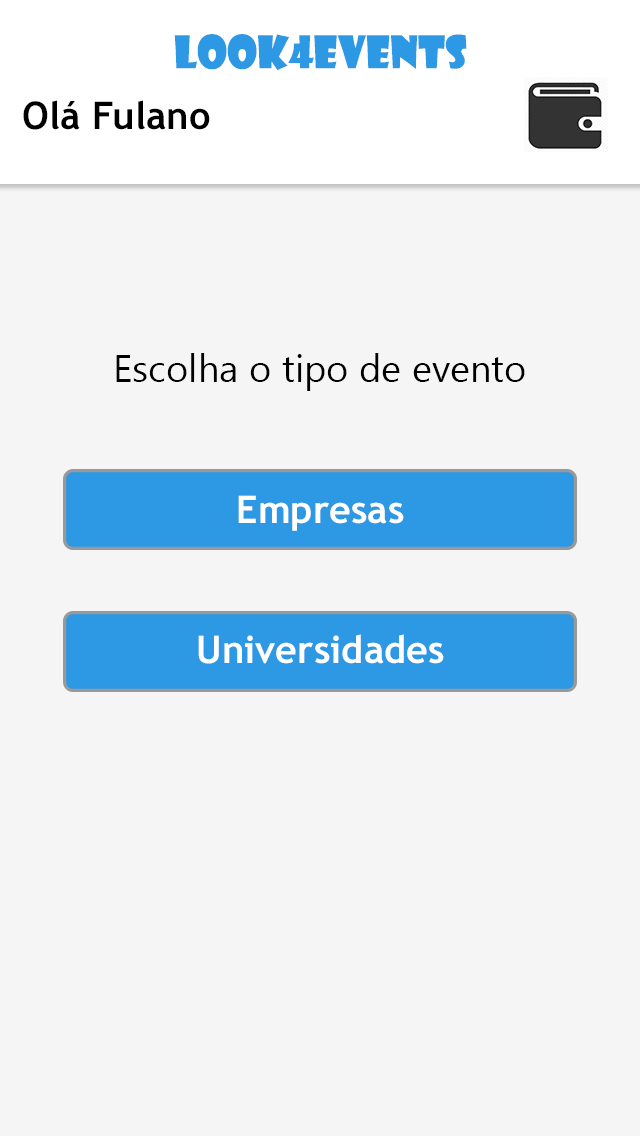
<style>
.page{position:relative;width:640px;height:1136px;background:#f5f5f5}
.page>*{position:absolute;margin:0}
.t1{font:43.6px "ShowcardGothic-Reg";color:#2d99e4}
.t2{font:38.1px "TrebuchetMS-Bold";color:#000000}
.t3{font:38.1px "TrebuchetMS-Bold";color:#ffffff}
</style>
<div class="page">
<p class="t1" style="left:174px;top:34px;width:293px;height:36px">look4events</p>
<p class="t2" style="left:23px;top:100px;width:187px;height:30px">Olá Fulano</p>
<p class="t3" style="left:238px;top:495px;width:166px;height:36px">Empresas</p>
<p class="t3" style="left:198px;top:634px;width:246px;height:30px">Universidades</p>
</div>
